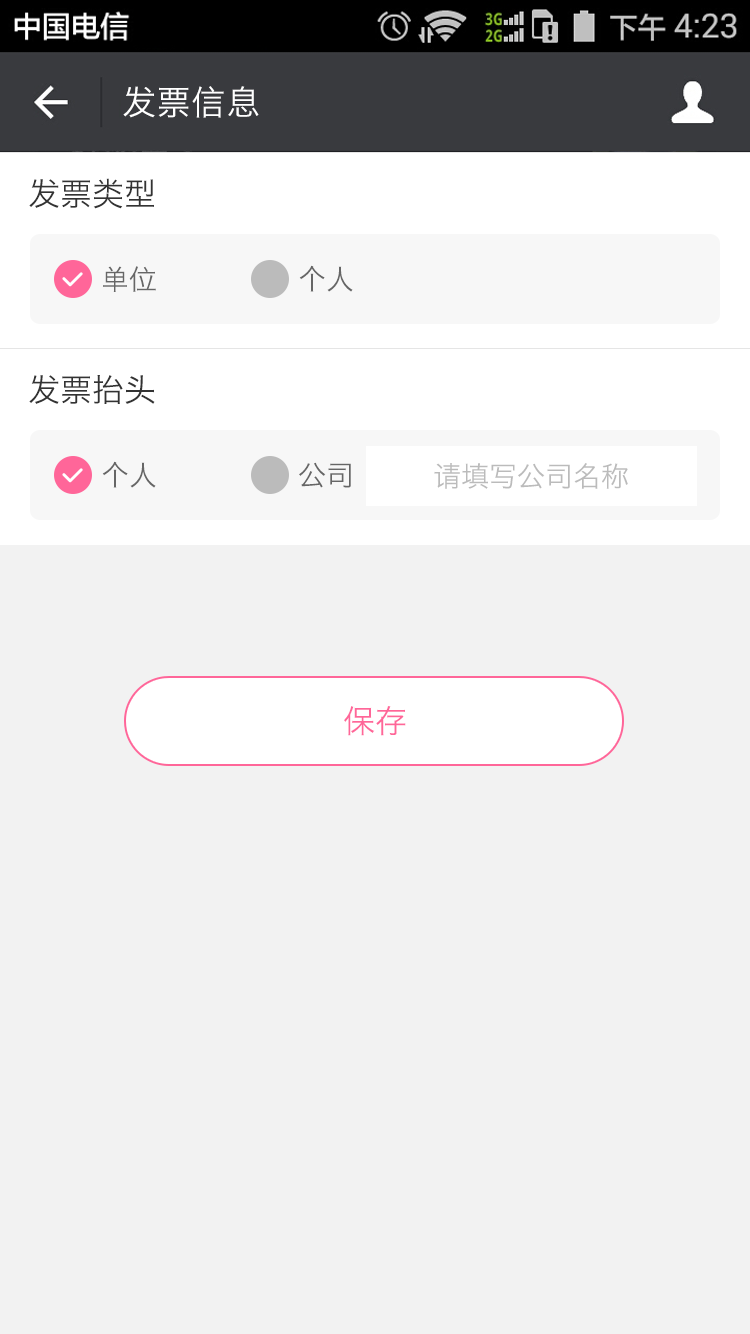
<style>
.page{position:relative;width:750px;height:1334px;background:#f2f2f2}
.page>*{position:absolute;margin:0}
.t1{font:34px "HiraginoSansGB-W3";letter-spacing:0.022em;color:#ffffff}
.t2{font:32px "HiraginoSansGB-W3";color:#333333}
.t3{font:28px "HiraginoSansGB-W3";color:#666666}
.t4{font:28px "HiraginoSansGB-W3";color:#bbbbbb}
.t5{font:32px "HiraginoSansGB-W3";color:#ff6699}
</style>
<div class="page">
<p class="t1" style="left:123px;top:86px;width:136px;height:32px">发票信息</p>
<p class="t2" style="left:29px;top:178px;width:125px;height:31px">发票类型</p>
<p class="t3" style="left:103px;top:266px;width:53px;height:26px">单位</p>
<p class="t3" style="left:299px;top:265px;width:54px;height:27px">个人</p>
<p class="t2" style="left:29px;top:375px;width:126px;height:29px">发票抬头</p>
<p class="t3" style="left:102px;top:461px;width:54px;height:27px">个人</p>
<p class="t3" style="left:299px;top:462px;width:52px;height:26px">公司</p>
<p class="t4" style="left:434px;top:463px;width:194px;height:26px">请填写公司名称</p>
<p class="t5" style="left:344px;top:706px;width:62px;height:30px">保存</p>
</div>
